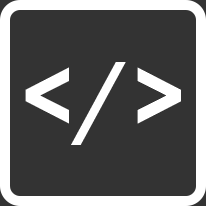
<style>
.page{position:relative;width:206px;height:206px;background:#333333}
.page>*{position:absolute;margin:0}
.t1{font:100px "FranklinGothic-Heavy";color:#ffffff}
</style>
<div class="page">
<p class="t1" style="left:25px;top:62px;width:156px;height:83px">&lt;/&gt;</p>
</div>
